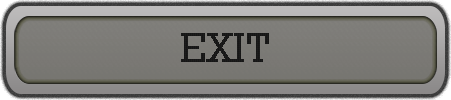
<style>
.page{position:relative;width:451px;height:100px}
.page>*{position:absolute;margin:0}
.t1{font:41.7px "Rockwell";color:#171717}
</style>
<div class="page">
<p class="t1" style="left:181px;top:33px;width:88px;height:29px">EXIT</p>
</div>
